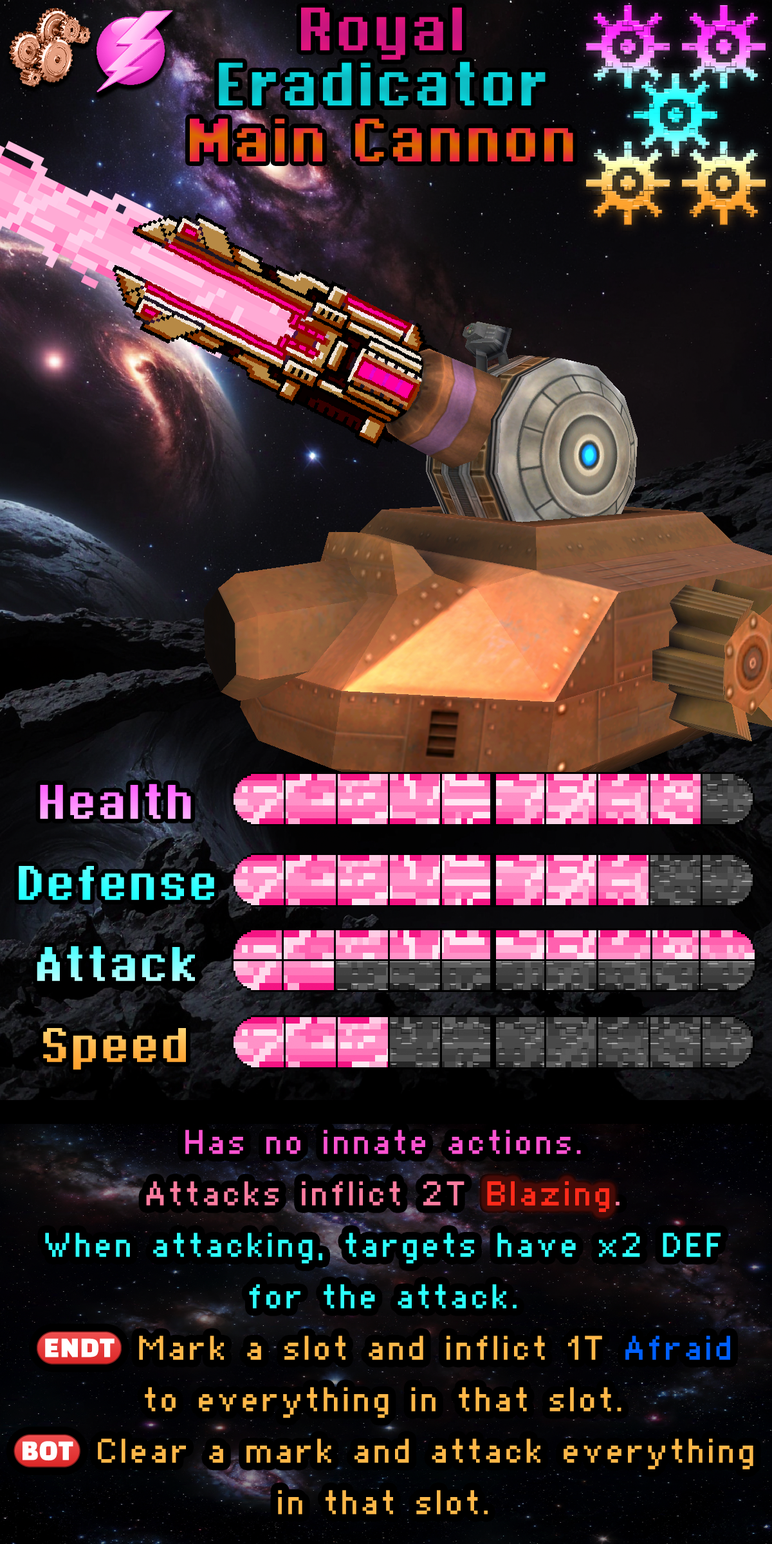
<style>
.page{position:relative;width:772px;height:1544px}
.page>*{position:absolute;margin:0}
.t1{font:81px "Supertext03Bold";color:#d2157e}
.t2{font:81px "Supertext03Bold";color:#0bc6cd}
.t3{font:81px "Supertext03Bold"}
.t4{font:64.3px "Supertext03Bold"}
.t5{font:64.3px "Supertext03Bold";color:#33ffff}
.t6{font:64.3px "Supertext03Bold";color:#ffb74b}
.t7{font:57.9px/51.5px "Supertext01";color:#2cfffd}
.t8{font:57.9px/51.5px "Supertext01";color:#fc53d1}
.t9{font:57.9px/51.5px "Supertext01";color:#fb7c9f}
.t10{font:57.9px/51.5px "Supertext01";color:#ff2a1a}
.t11{font:57.9px/51.5px "stoogedings-Regular";color:#ffb849}
.t12{font:57.9px/51.5px "Supertext01";color:#ffb849}
.t13{font:57.9px/51.5px "Supertext01";color:#0060ff}
</style>
<div class="page">
<p class="t1" style="left:301px;top:7px;width:161px;height:53px">Royal</p>
<p class="t2" style="left:219px;top:62px;width:327px;height:44px">Eradicator</p>
<p class="t3" style="left:190px;top:118px;width:383px;height:44px">Main Cannon</p>
<p class="t4" style="left:40px;top:784px;width:151px;height:35px">Health</p>
<p class="t5" style="left:19px;top:866px;width:195px;height:34px">Defense</p>
<p class="t4" style="left:37px;top:946px;width:158px;height:35px">Attack</p>
<p class="t6" style="left:43px;top:1028px;width:143px;height:42px">Speed</p>
<p class="t7" style="left:14px;top:1130px;width:739px;height:385px;text-align:center"><span class="t8">Has no innate actions.<br></span><span class="t9">Attacks inflict 2T </span><span class="t10">Blazing</span><span class="t9">.<br></span>When attacking, targets have x2 DEF for the attack.<br><span class="t11">(ENDT)</span><span class="t12"> Mark a slot and inflict 1T </span><span class="t13">Afraid</span><span class="t12"> to everything in that slot.<br></span><span class="t11">(BOT)</span><span class="t12"> Clear a mark and attack everything in that slot.</span></p>
</div>
